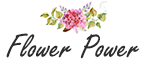
<style>
.page{position:relative;width:146px;height:66px;background:#ffffff}
.page>*{position:absolute;margin:0}
.t1{font:36px "FreestyleScript-Regular";color:#2d2b2c}
</style>
<div class="page">
<p class="t1" style="left:6px;top:33px;width:134px;height:26px">Flower Power</p>
</div>
